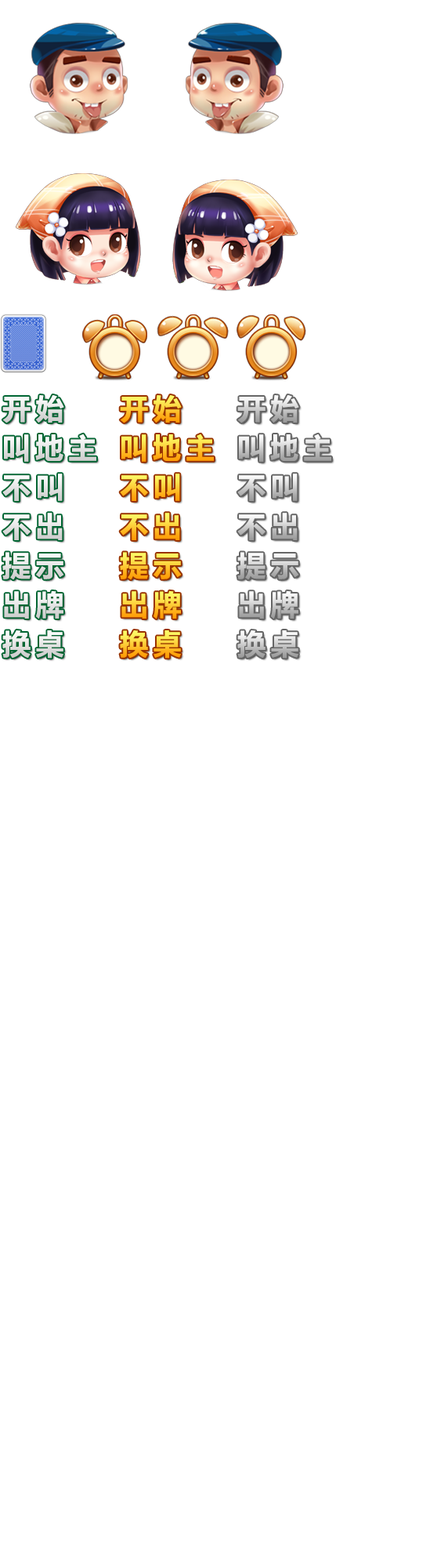
<style>
.page{position:relative;width:437px;height:1568px;background:#ffffff}
.page>*{position:absolute;margin:0}
.t1{font:28.2px "MicrosoftYaHei-Bold";letter-spacing:0.18em;color:#e5e6e5}
.t2{font:28.2px "MicrosoftYaHei-Bold";letter-spacing:0.18em}
.t3{font:28.2px "MicrosoftYaHei-Bold";letter-spacing:0.18em;color:#e4e4e4}
.t4{font:28.2px "MicrosoftYaHei-Bold";letter-spacing:0.18em;color:#e7e8e7}
</style>
<div class="page">
<p class="t1" style="left:2px;top:395px;width:62px;height:28px">开始</p>
<p class="t2" style="left:120px;top:395px;width:62px;height:28px">开始</p>
<p class="t2" style="left:238px;top:395px;width:61px;height:28px">开始</p>
<p class="t3" style="left:4px;top:434px;width:92px;height:28px">叫地主</p>
<p class="t2" style="left:122px;top:434px;width:92px;height:28px">叫地主</p>
<p class="t1" style="left:2px;top:474px;width:61px;height:27px">不叫</p>
<p class="t2" style="left:120px;top:474px;width:60px;height:27px">不叫</p>
<p class="t1" style="left:2px;top:513px;width:61px;height:27px">不出</p>
<p class="t2" style="left:120px;top:513px;width:60px;height:27px">不出</p>
<p class="t4" style="left:2px;top:552px;width:62px;height:28px">提示</p>
<p class="t2" style="left:120px;top:552px;width:62px;height:28px">提示</p>
<p class="t2" style="left:238px;top:552px;width:61px;height:28px">提示</p>
<p class="t4" style="left:4px;top:590px;width:60px;height:29px">出牌</p>
<p class="t2" style="left:122px;top:590px;width:59px;height:29px">出牌</p>
<p class="t2" style="left:239px;top:590px;width:60px;height:29px">出牌</p>
<p class="t3" style="left:2px;top:630px;width:62px;height:29px">换桌</p>
<p class="t2" style="left:120px;top:630px;width:61px;height:29px">换桌</p>
<p class="t2" style="left:238px;top:630px;width:61px;height:29px">换桌</p>
</div>
